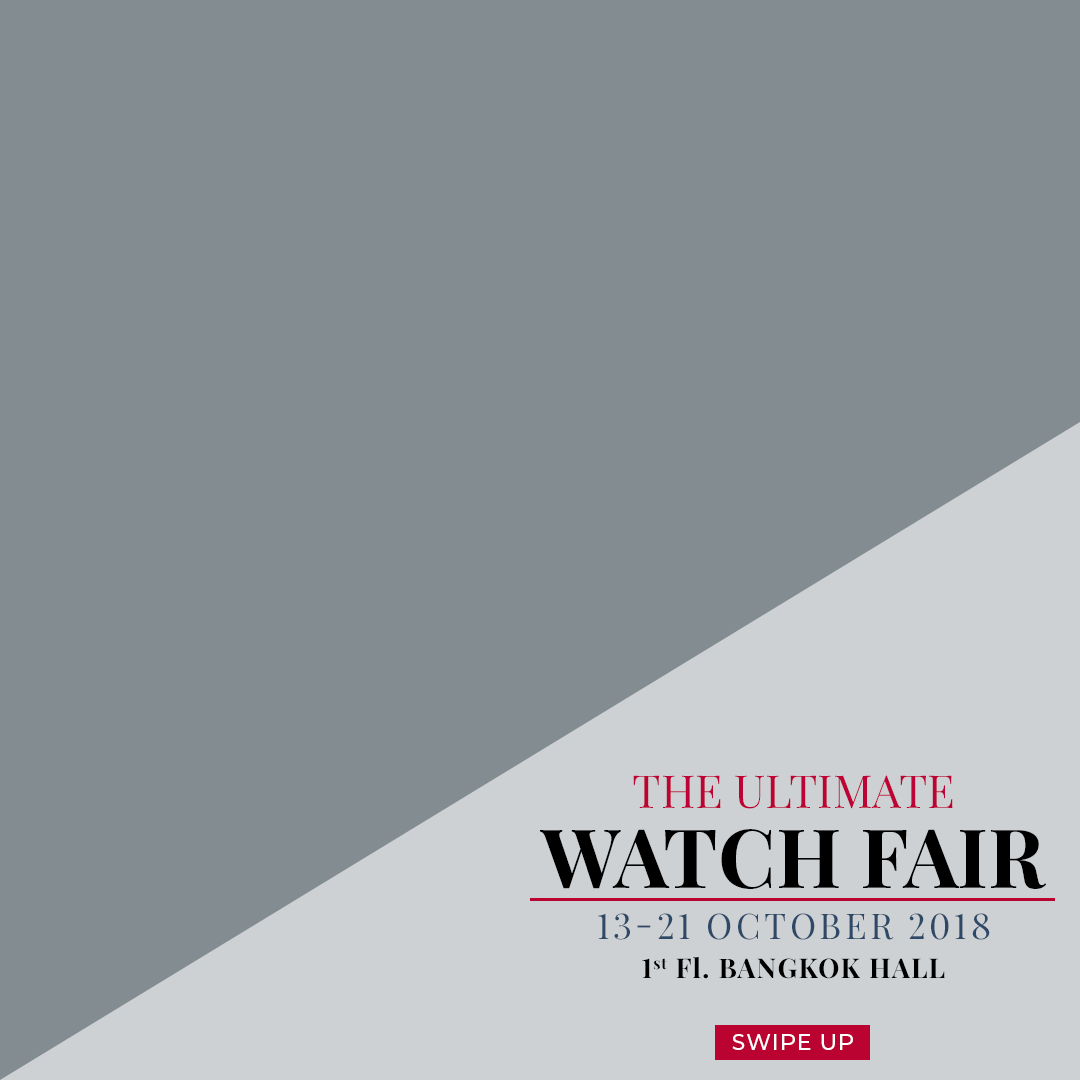
<style>
.page{position:relative;width:1080px;height:1080px;background:#838c91}
.page>*{position:absolute;margin:0}
.t1{font:45.6px "PlayfairDisplay-Regular";color:#bd0335;text-transform:uppercase}
.t2{font:81.9px "PlayfairDisplay-Bold";color:#000000;text-transform:uppercase}
.t3{font:35.4px "PlayfairDisplay-Regular";letter-spacing:0.1em;color:#2e4967;text-transform:uppercase}
.t4{font:27.1px "PlayfairDisplay-Bold";letter-spacing:0.05em;color:#000000;text-transform:uppercase}
.t5{font:27.1px "PlayfairDisplay-Bold";letter-spacing:0.05em;color:#000000}
.t6{font:22px "Montserrat-Medium";letter-spacing:0.05em;color:#ffffff;text-transform:uppercase}
</style>
<div class="page">
<p class="t1" style="left:633px;top:775px;width:320px;height:34px">The Ultimate</p>
<p class="t2" style="left:540px;top:829px;width:507px;height:60px">Watch Fair</p>
<p class="t3" style="left:598px;top:913px;width:392px;height:27px">13-21 October 2018</p>
<p class="t4" style="left:642px;top:957px;width:303px;height:22px">1<span class="t5">st Fl</span>. Bangkok Hall</p>
<p class="t6" style="left:732px;top:1034px;width:121px;height:16px">Swipe Up</p>
</div>
